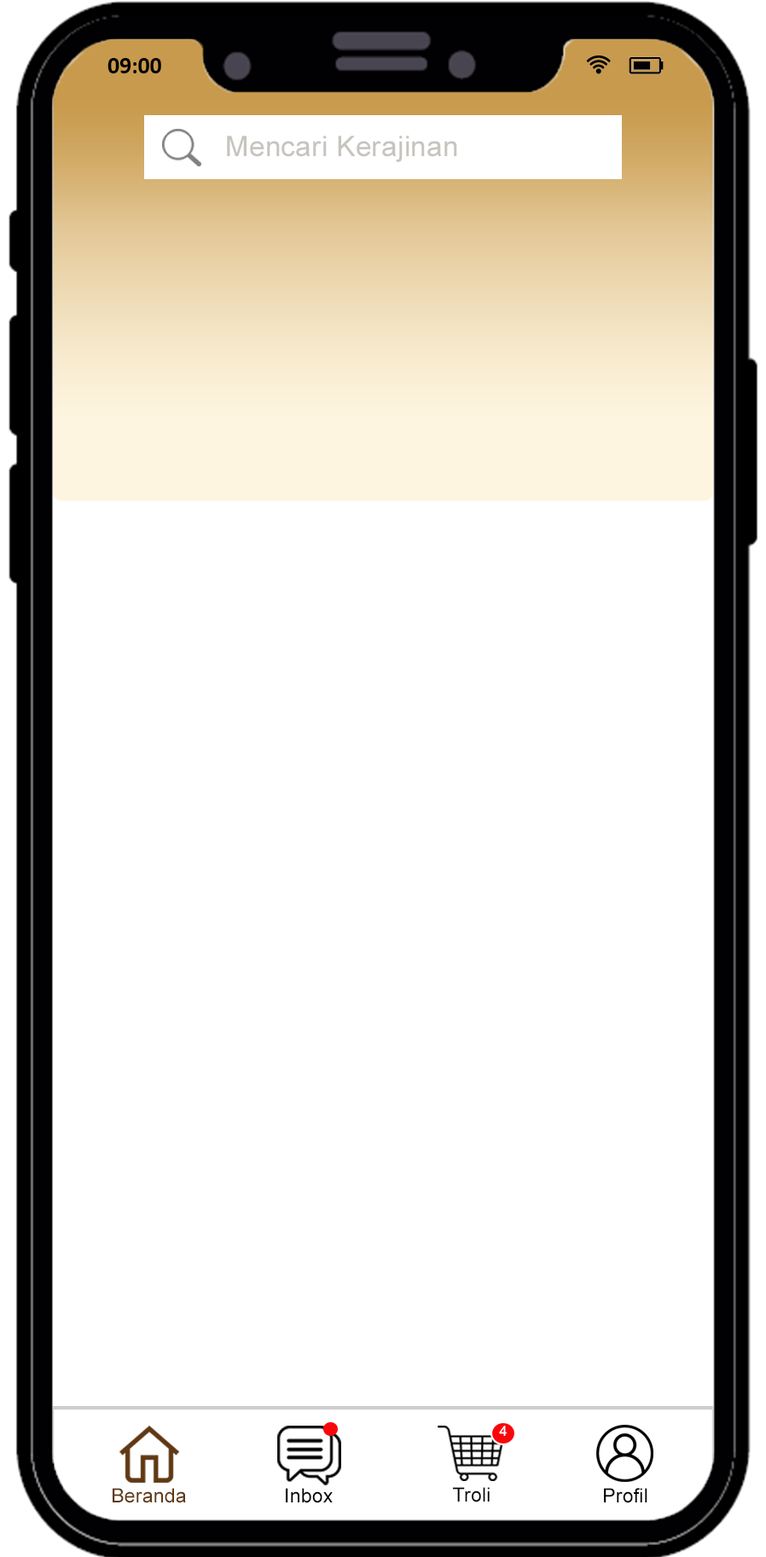
<style>
.page{position:relative;width:766px;height:1557px;background:#ffffff}
.page>*{position:absolute;margin:0}
.t1{font:23.6px "Calibri-Bold";color:#000000}
.t2{font:28.4px "ArialMT";letter-spacing:0.01em;color:#c7c4be}
.t3{font:14.2px "ArialMT";letter-spacing:0.01em;color:#ffffff}
.t4{font:19.6px "ArialMT";letter-spacing:0.01em;color:#603813}
.t5{font:19.6px "ArialMT";letter-spacing:0.01em;color:#000000}
</style>
<div class="page">
<p class="t1" style="left:107px;top:58px;width:54px;height:15px">09:00</p>
<p class="t2" style="left:227px;top:136px;width:230px;height:26px">Mencari Kerajinan</p>
<p class="t3" style="left:499px;top:1425px;width:8px;height:11px">4</p>
<p class="t4" style="left:113px;top:1488px;width:73px;height:15px">Beranda</p>
<p class="t5" style="left:286px;top:1488px;width:47px;height:15px">Inbox</p>
<p class="t5" style="left:453px;top:1487px;width:37px;height:15px">Troli</p>
<p class="t5" style="left:604px;top:1488px;width:43px;height:15px">Profil</p>
</div>
